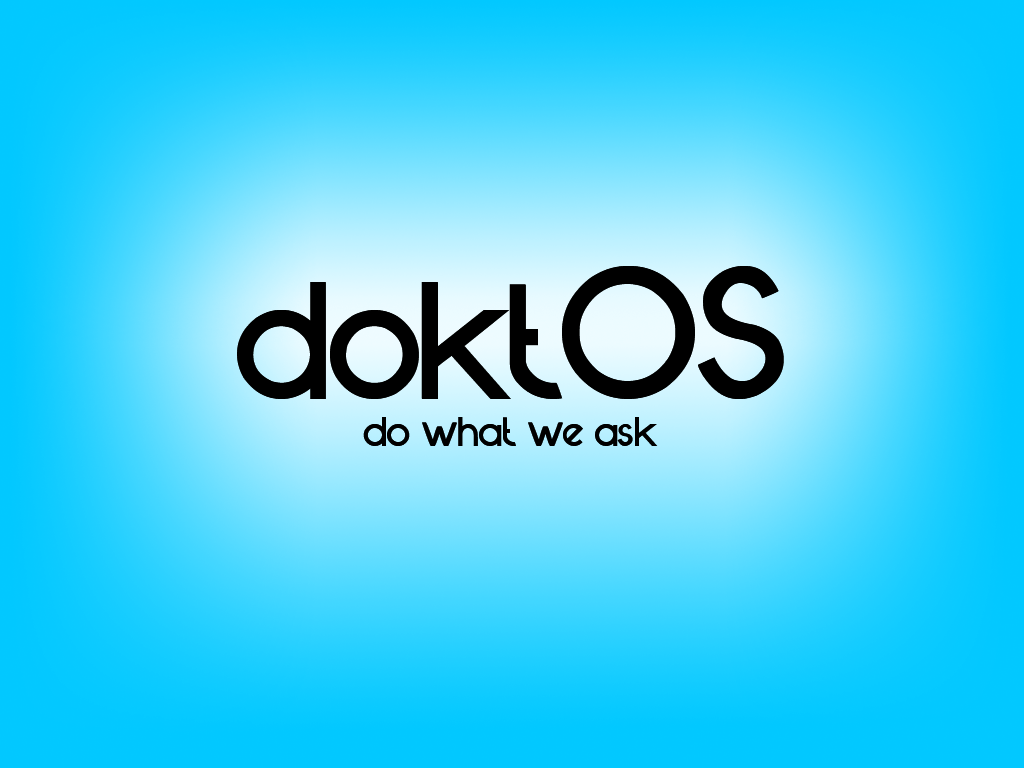
<style>
.page{position:relative;width:1024px;height:768px}
.page>*{position:absolute;margin:0}
.t1{font:200px "futuremood";color:#000000}
.t2{font:50px "futuremood";color:#000000}
</style>
<div class="page">
<p class="t1" style="left:237px;top:266px;width:547px;height:133px">doktOS</p>
<p class="t2" style="left:363px;top:417px;width:295px;height:29px">do what we ask</p>
</div>
